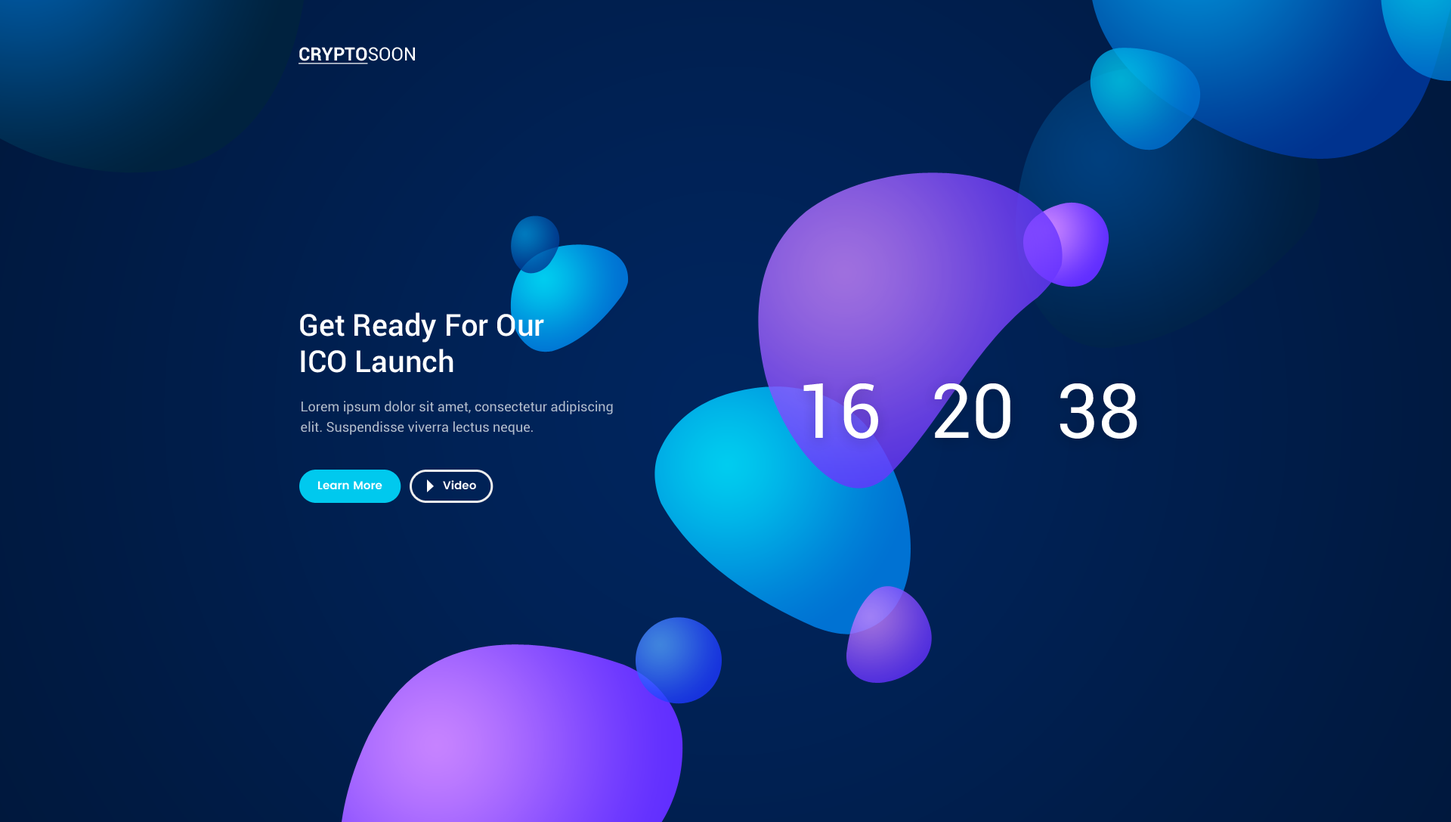
<style>
.page{position:relative;width:1451px;height:822px}
.page>*{position:absolute;margin:0}
.t1{font:18.1px "Roboto-Bold";color:#ffffff;text-transform:uppercase;text-decoration:underline}
.t2{font:18.1px "Roboto-Regular";color:#ffffff;text-transform:uppercase}
.t3{font:30.2px "Roboto-Medium";color:#ffffff}
.t4{font:75.6px "Roboto-Regular";color:#ffffff}
.t5{font:13.6px/20.4px "Roboto-Regular";color:#b3bdcc}
.t6{font:11.3px "Poppins-SemiBold";color:#ffffff}
</style>
<div class="page">
<p class="t1" style="left:299px;top:47px;width:116px;height:17px">Crypto<span class="t2">Soon</span></p>
<p class="t3" style="left:300px;top:312px;width:244px;height:61px">Get Ready For Our<br>ICO Launch</p>
<p class="t4" style="left:803px;top:383px;width:75px;height:55px">16</p>
<p class="t4" style="left:934px;top:383px;width:77px;height:55px">20</p>
<p class="t4" style="left:1060px;top:383px;width:78px;height:55px">38</p>
<p class="t5" style="left:301px;top:401px;width:312px;height:34px">Lorem ipsum dolor sit amet, consectetur adipiscing elit. Suspendisse viverra lectus neque.<br>Phasellus sit amet fermentum purus, et convallis sem</p>
<p class="t6" style="left:318px;top:481px;width:64px;height:8px">Learn More</p>
<p class="t6" style="left:443px;top:480px;width:33px;height:9px">Video</p>
</div>
